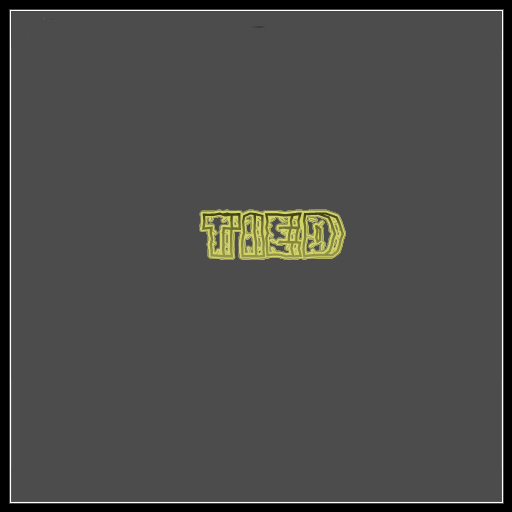
<style>
.page{position:relative;width:512px;height:512px;background:#4c4c4c}
.page>*{position:absolute;margin:0}
.t1{font:45px "RockFont"}
</style>
<div class="page">
<p class="t1" style="left:202px;top:212px;width:142px;height:46px">TIED</p>
</div>
